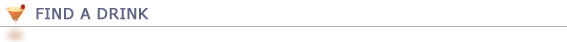
<style>
.page{position:relative;width:567px;height:42px;background:#ffffff}
.page>*{position:absolute;margin:0}
.t1{font:15px "Verdana";color:#636388;font-weight:bold}
</style>
<div class="page">
<p class="t1" style="left:36px;top:8px;width:113px;height:12px">FIND A DRINK</p>
</div>
